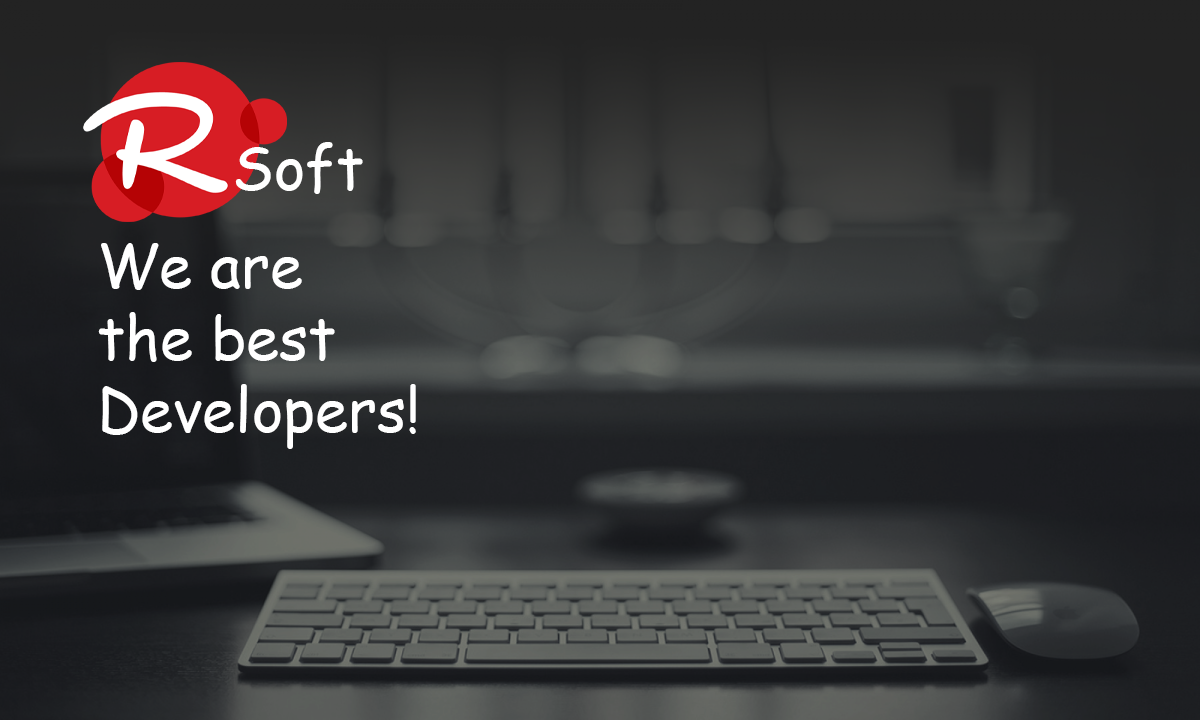
<style>
.page{position:relative;width:1200px;height:720px}
.page>*{position:absolute;margin:0}
.t1{font:60px "ComicSansMS";color:#ffffff}
</style>
<div class="page">
<p class="t1" style="left:235px;top:142px;width:128px;height:52px">Soft</p>
<p class="t1" style="left:98px;top:243px;width:318px;height:206px">We are<br>the best<br>Developers!</p>
</div>
